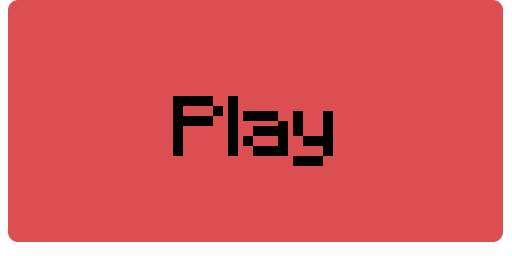
<style>
.page{position:relative;width:512px;height:256px;background:#db4e52}
.page>*{position:absolute;margin:0}
.t1{font:80px "Minecraft";color:#000000}
</style>
<div class="page">
<p class="t1" style="left:173px;top:96px;width:160px;height:70px">Play</p>
</div>
